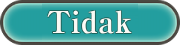
<style>
.page{position:relative;width:180px;height:45px}
.page>*{position:absolute;margin:0}
.t1{font:30px "RyuminPro-ExBold";color:#fff7f3}
</style>
<div class="page">
<p class="t1" style="left:47px;top:10px;width:85px;height:24px">Tidak</p>
</div>
